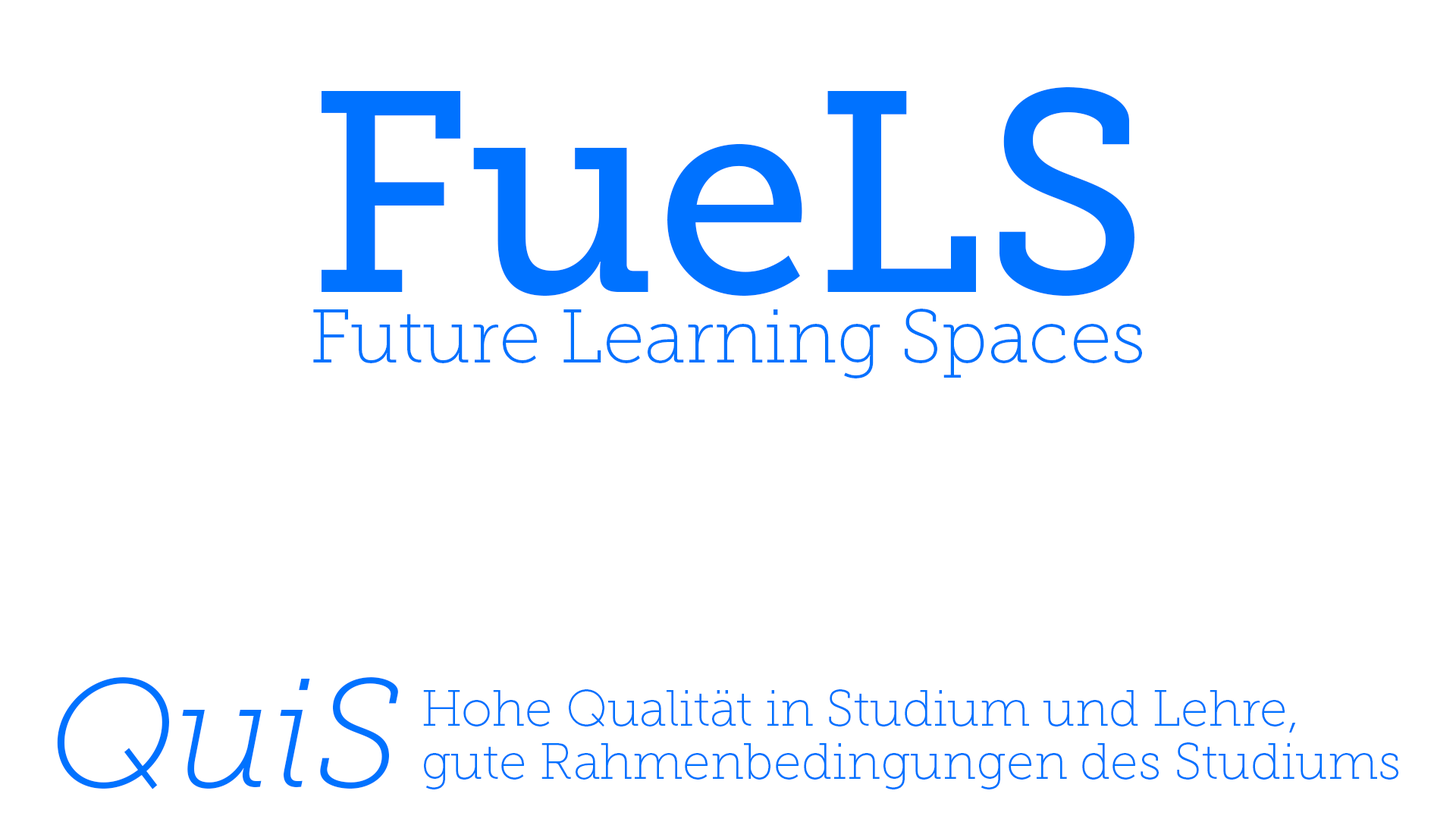
<style>
.page{position:relative;width:1456px;height:819px;background:#ffffff}
.page>*{position:absolute;margin:0}
.t1{font:284.4px "MuseoSlab-500";color:#0072ff}
.t2{font:75.8px "MuseoSlab-100";color:#0072ff}
.t3{font:154.8px "MuseoSlab-100Italic";color:#0072ff}
.t4{font:50.6px/53.7px "MuseoSlab-100";color:#0072ff}
</style>
<div class="page">
<p class="t1" style="left:322px;top:87px;width:812px;height:210px">FueLS</p>
<p class="t2" style="left:313px;top:309px;width:829px;height:69px">Future Learning Spaces</p>
<p class="t3" style="left:57px;top:677px;width:341px;height:112px">QuiS</p>
<p class="t4" style="left:423px;top:689px;width:975px;height:100px">Hohe Qualität in Studium und Lehre,<br>gute Rahmenbedingungen des Studiums</p>
</div>
